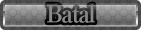
<style>
.page{position:relative;width:141px;height:30px}
.page>*{position:absolute;margin:0}
.t1{font:24px "RyuminPro-ExBold";letter-spacing:-0.08em;color:#8b8b8b;scale:0.9 1}
</style>
<div class="page">
<p class="t1" style="left:47px;top:4px;width:48px;height:19px">Batal</p>
</div>
